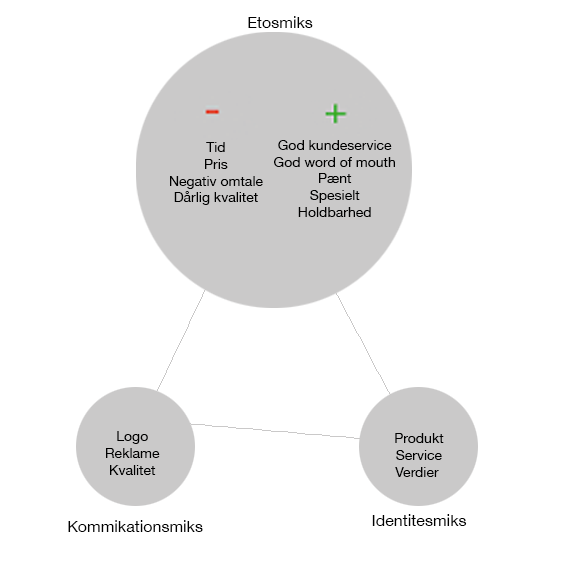
<style>
.page{position:relative;width:583px;height:584px;background:#ffffff}
.page>*{position:absolute;margin:0}
.t1{font:16px "HelveticaNeue";color:#000000}
.t2{font:14px "HelveticaNeue";color:#000000}
</style>
<div class="page">
<p class="t1" style="left:248px;top:16px;width:65px;height:12px">Etosmiks</p>
<p class="t2" style="left:170px;top:142px;width:93px;height:63px;text-align:center">Tid<br>Pris<br>Negativ omtale<br>Dårlig kvalitet</p>
<p class="t2" style="left:274px;top:140px;width:121px;height:77px;text-align:center">God kundeservice<br>God word of mouth<br>Pænt<br>Spesielt<br>Holdbarhed</p>
<p class="t2" style="left:106px;top:431px;width:54px;height:44px;text-align:center">Logo<br>Reklame<br>Kvalitet</p>
<p class="t2" style="left:395px;top:433px;width:49px;height:44px;text-align:center">Produkt<br>Service<br>Verdier</p>
<p class="t1" style="left:68px;top:520px;width:135px;height:12px">Kommikationsmiks</p>
<p class="t1" style="left:372px;top:514px;width:95px;height:12px">Identitesmiks</p>
</div>
